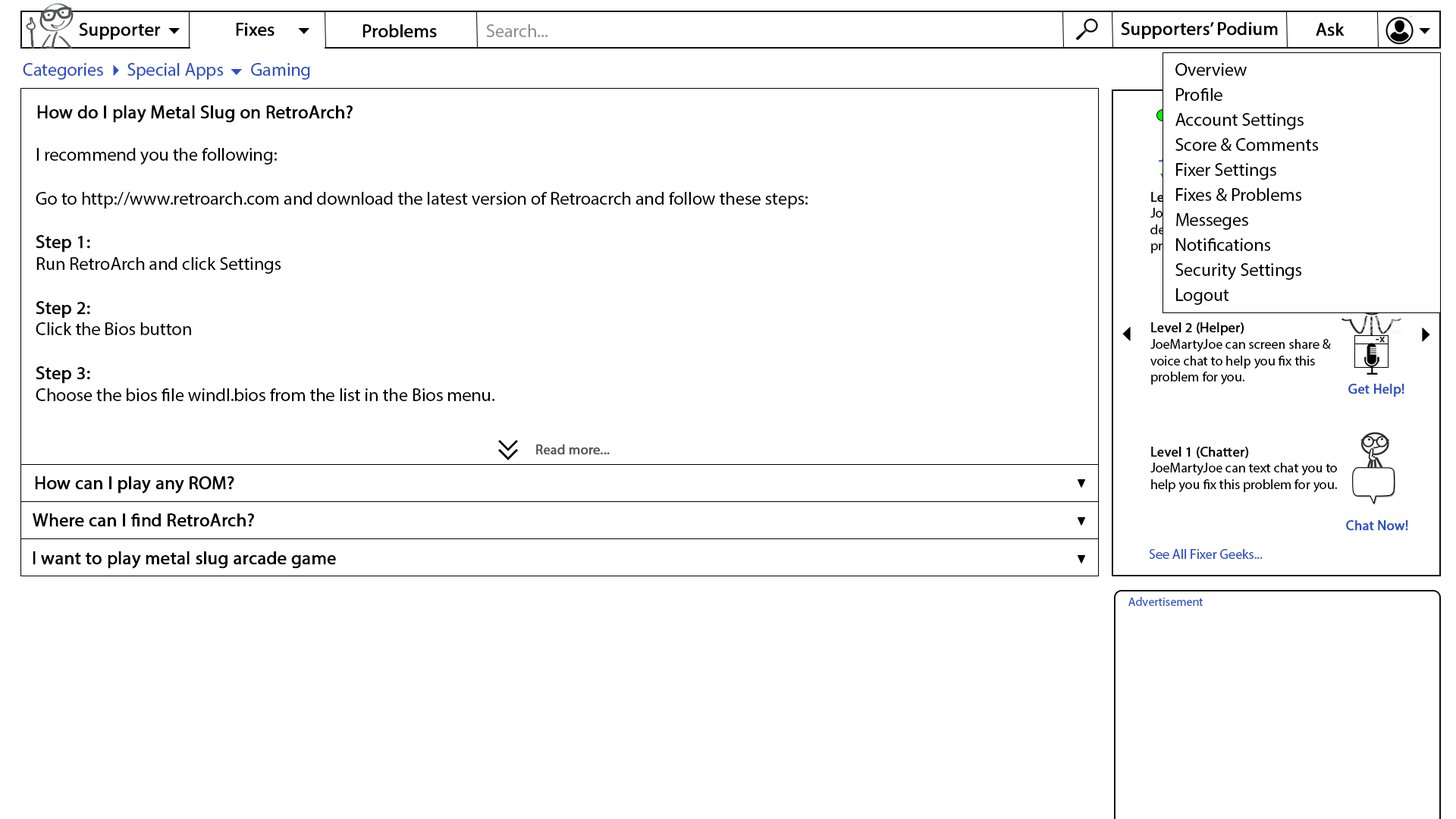
<style>
.page{position:relative;width:1456px;height:819px;background:#ffffff}
.page>*{position:absolute;margin:0}
.t1{font:18.2px "MyriadPro-Regular";color:#000000;font-weight:bold}
.t2{font:18.2px "MyriadPro-Regular";color:#919090}
.t3{font:18.2px "MyriadPro-Regular";color:#010000;font-weight:bold}
.t4{font:18.2px "MyriadPro-Regular";color:#2d4fc9}
.t5{font:18.2px/25px "MyriadPro-Regular";color:#010000}
.t6{font:18.2px "MyriadPro-Regular";color:#000000}
.t7{font:13.6px "MyriadPro-Regular";color:#000000}
.t8{font:13.6px "MyriadPro-Regular";color:#000000;font-weight:bold}
.t9{font:10.7px "SegoeUI";color:#000000;font-weight:bold}
.t10{font:13.6px "MyriadPro-Regular";color:#2d4fc9;font-weight:bold}
.t11{font:13.6px "MyriadPro-Regular";color:#555555;font-weight:bold}
.t12{font:13.6px "MyriadPro-Regular";color:#2d4fc9}
.t13{font:12.1px "MyriadPro-Regular";color:#2d4fc9}
</style>
<div class="page">
<p class="t1" style="left:79px;top:23px;width:82px;height:17px">Supporter</p>
<p class="t1" style="left:236px;top:23px;width:39px;height:13px">Fixes</p>
<p class="t1" style="left:362px;top:24px;width:75px;height:14px">Problems</p>
<p class="t2" style="left:486px;top:24px;width:62px;height:13px">Search...</p>
<p class="t3" style="left:1121px;top:22px;width:157px;height:17px">Supporters’ Podium</p>
<p class="t1" style="left:1316px;top:23px;width:29px;height:13px">Ask</p>
<p class="t4" style="left:23px;top:63px;width:287px;height:17px">Categories      Special Apps       Gaming</p>
<p class="t5" style="left:1175px;top:63px;width:144px;height:242px">Overview<br>Profile<br>Account Settings<br>Score &amp; Comments<br>Fixer Settings<br>Fixes &amp; Problems<br>Messeges<br>Notifications<br>Security Settings<br>Logout</p>
<p class="t1" style="left:37px;top:105px;width:316px;height:18px">How do I play Metal Slug on RetroArch?</p>
<p class="t6" style="left:36px;top:148px;width:772px;height:253px">I recommend you the following:<br><br>Go to http://www.retroarch.com and download the latest version of Retroacrch and follow these steps:<br><br><span class="t1">Step 1:<br></span>Run RetroArch and click Settings<br><br><span class="t1">Step 2:<br></span>Click the Bios button<br><br><span class="t1">Step 3:<br></span>Choose the bios file windl.bios from the list in the Bios menu.</p>
<p class="t7" style="left:1150px;top:192px;width:188px;height:300px"><span class="t8"><br>Level 3 (Fixer) <br></span>JoeMartyJoe can connect to your<br>device remotely and fix this<br>problem for you.<br><br><br><br><br><span class="t8">Level 2 (Helper)<br></span>JoeMartyJoe can screen share &amp;<br>voice chat to help you fix this<br>problem for you.<br><br><br><br><br><span class="t8">Level 1 (Chatter)<br></span>JoeMartyJoe can text chat you to<br>help you fix this problem for you.</p>
<p class="t9" style="left:1376px;top:337px;width:9px;height:6px">-x</p>
<p class="t10" style="left:1348px;top:384px;width:56px;height:13px">Get Help!</p>
<p class="t11" style="left:536px;top:444px;width:74px;height:11px">Read more...</p>
<p class="t1" style="left:35px;top:476px;width:199px;height:18px">How can I play any ROM?</p>
<p class="t1" style="left:33px;top:513px;width:221px;height:14px">Where can I find RetroArch?</p>
<p class="t10" style="left:1346px;top:520px;width:62px;height:11px">Chat Now!</p>
<p class="t1" style="left:33px;top:551px;width:303px;height:18px">I want to play metal slug arcade game</p>
<p class="t12" style="left:1149px;top:549px;width:114px;height:10px">See All Fixer Geeks...</p>
<p class="t13" style="left:1128px;top:597px;width:75px;height:9px">Advertisement</p>
</div>
